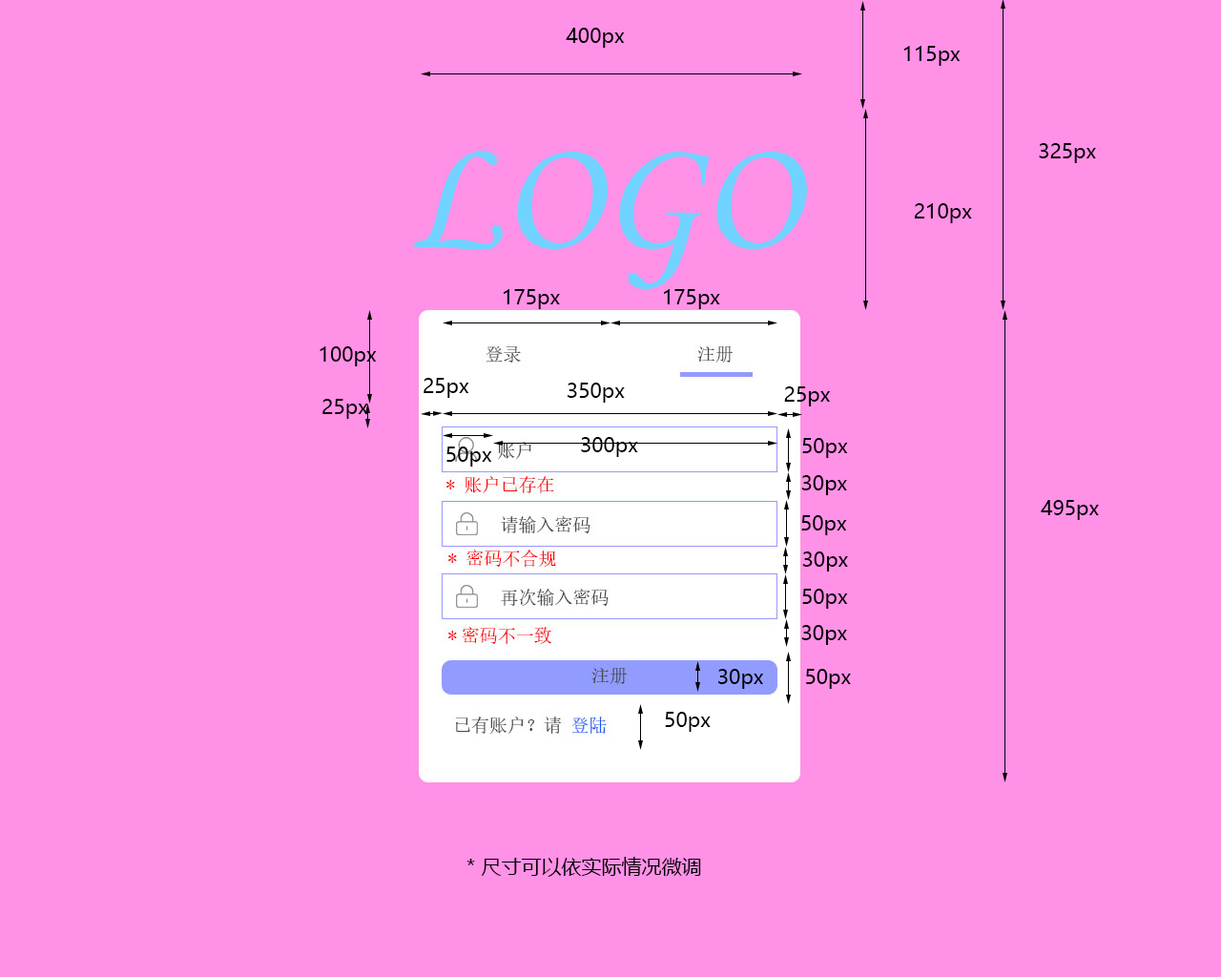
<style>
.page{position:relative;width:1221px;height:977px;background:#ff91e7}
.page>*{position:absolute;margin:0}
.t1{font:20px "MicrosoftYaHei";color:#000000}
</style>
<div class="page">
<p class="t1" style="left:566px;top:28px;width:59px;height:20px">400px</p>
<p class="t1" style="left:903px;top:46px;width:57px;height:20px">115px</p>
<p class="t1" style="left:1039px;top:143px;width:57px;height:20px">325px</p>
<p class="t1" style="left:914px;top:203px;width:58px;height:20px">210px</p>
<p class="t1" style="left:504px;top:289px;width:56px;height:20px">175px</p>
<p class="t1" style="left:664px;top:289px;width:56px;height:20px">175px</p>
<p class="t1" style="left:320px;top:346px;width:57px;height:20px">100px</p>
<p class="t1" style="left:423px;top:378px;width:46px;height:20px">25px</p>
<p class="t1" style="left:568px;top:382px;width:57px;height:21px">350px</p>
<p class="t1" style="left:784px;top:386px;width:46px;height:20px">25px</p>
<p class="t1" style="left:322px;top:399px;width:46px;height:20px">25px</p>
<p class="t1" style="left:581px;top:437px;width:57px;height:20px">300px</p>
<p class="t1" style="left:802px;top:438px;width:46px;height:20px">50px</p>
<p class="t1" style="left:446px;top:446px;width:46px;height:20px">50px</p>
<p class="t1" style="left:801px;top:475px;width:46px;height:20px">30px</p>
<p class="t1" style="left:1041px;top:500px;width:58px;height:20px">495px</p>
<p class="t1" style="left:801px;top:515px;width:46px;height:20px">50px</p>
<p class="t1" style="left:802px;top:551px;width:46px;height:20px">30px</p>
<p class="t1" style="left:802px;top:589px;width:46px;height:20px">50px</p>
<p class="t1" style="left:801px;top:625px;width:46px;height:20px">30px</p>
<p class="t1" style="left:718px;top:669px;width:45px;height:20px">30px</p>
<p class="t1" style="left:806px;top:669px;width:45px;height:20px">50px</p>
<p class="t1" style="left:665px;top:712px;width:46px;height:20px">50px</p>
<p class="t1" style="left:466px;top:857px;width:235px;height:20px">* 尺寸可以依实际情况微调</p>
</div>
